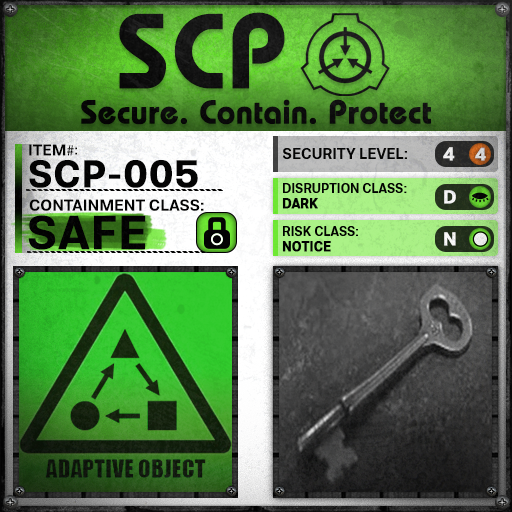
<style>
.page{position:relative;width:512px;height:512px}
.page>*{position:absolute;margin:0}
.t1{font:105.8px "BauhausLT-Demi";color:#000000;font-weight:bold}
.t2{font:33px "BauhausLT-Demi";color:#000000;font-weight:bold}
.t3{font:15.7px "Molde-Semibold";color:#000000}
.t4{font:15.7px "MyriadPro-Regular";color:#000000}
.t5{font:13.7px "Molde-Semibold";color:#000000}
.t6{font:15px "Molde-Semibold";color:#000000}
.t7{font:18.6px "Molde-Semibold";color:#ffffff;font-weight:bold}
.t8{font:17.8px "Molde-Semibold";color:#d5d6d6;font-weight:bold}
.t9{font:38.2px "Molde-Semibold";color:#000000;font-weight:bold}
.t10{font:12.8px "Molde-Semibold";color:#000000}
.t11{font:12.8px "Molde-Semibold";color:#000000;font-weight:bold}
.t12{font:15.9px "Molde-Semibold";color:#000000}
.t13{font:47.2px "Molde-Semibold";color:#000000;font-weight:bold}
</style>
<div class="page">
<p class="t1" style="left:119px;top:12px;width:166px;height:77px">SCP</p>
<p class="t2" style="left:81px;top:99px;width:350px;height:26px">Secure. Contain. Protect</p>
<p class="t3" style="left:29px;top:144px;width:45px;height:12px">ITEM<span class="t4">#</span></p>
<p class="t5" style="left:75px;top:147px;width:2px;height:8px">:</p>
<p class="t6" style="left:283px;top:148px;width:124px;height:11px">SECURITY LEVEL:</p>
<p class="t7" style="left:443px;top:147px;width:12px;height:14px">4</p>
<p class="t8" style="left:475px;top:147px;width:11px;height:14px">4</p>
<p class="t9" style="left:29px;top:160px;width:169px;height:28px">SCP-005</p>
<p class="t10" style="left:282px;top:183px;width:125px;height:26px">DISRUPTION CLASS:<br><span class="t11">DARK</span></p>
<p class="t7" style="left:444px;top:190px;width:12px;height:14px">D</p>
<p class="t12" style="left:29px;top:199px;width:175px;height:12px">CONTAINMENT CLASS:</p>
<p class="t13" style="left:28px;top:215px;width:118px;height:35px">SAFE</p>
<p class="t10" style="left:282px;top:226px;width:76px;height:26px">RISK CLASS:<br><span class="t11">NOTICE</span></p>
<p class="t7" style="left:444px;top:232px;width:12px;height:14px">N</p>
</div>
